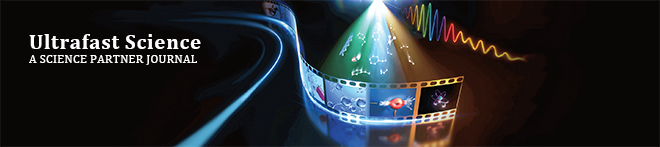
<style>
.page{position:relative;width:660px;height:147px;background:#090606}
.page>*{position:absolute;margin:0}
.t1{font:12px "Cambria";letter-spacing:0.025em;color:#fffdfd}
.t2{font:21.3px "Cambria-Bold";letter-spacing:0.025em;color:#fffdfd}
</style>
<div class="page">
<p class="t1" style="left:29px;top:34px;width:172px;height:31px"><span class="t2">Ultrafast Science<br></span>A SCIENCE PARTNER JOURNAL</p>
</div>
